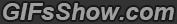
<style>
.page{position:relative;width:177px;height:24px;background:#333333}
.page>*{position:absolute;margin:0}
.t1{font:24px "Arial-BoldItalicMT";color:#9f9f9f}
</style>
<div class="page">
<p class="t1" style="left:3px;top:3px;width:171px;height:17px">GIFsShow.com</p>
</div>
